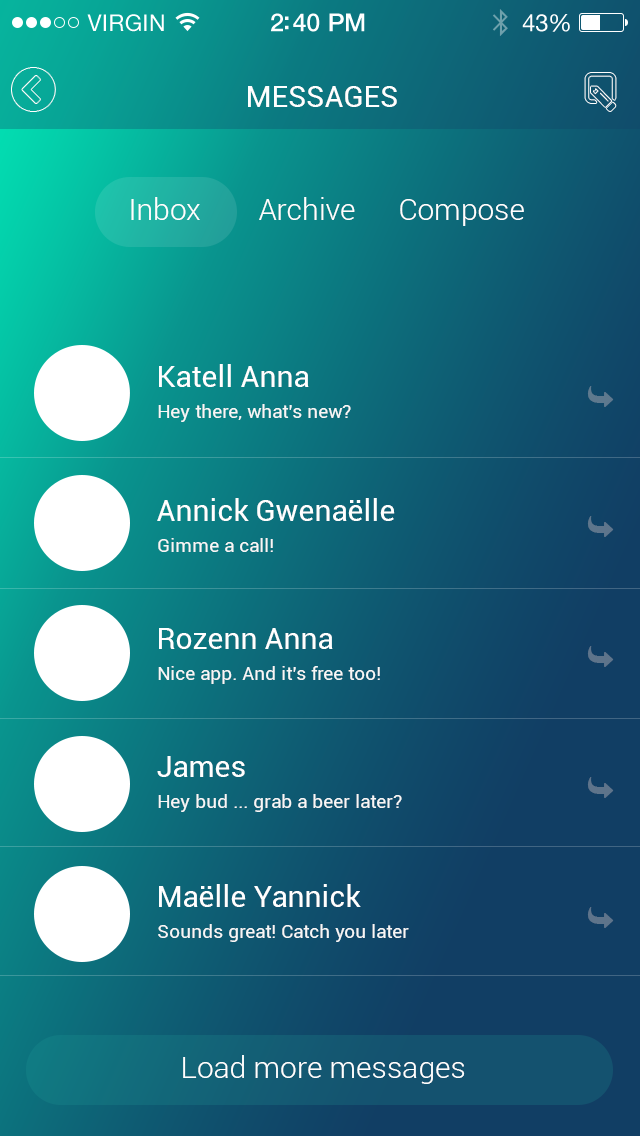
<style>
.page{position:relative;width:640px;height:1136px}
.page>*{position:absolute;margin:0}
.t1{font:30px "Roboto-Regular";color:#ffffff;text-transform:uppercase}
.t2{font:30px "Roboto-Light";color:#ffffff}
.t3{font:30px "Roboto-Regular";color:#ffffff}
.t4{font:19px "Roboto-Regular";color:#f7f7f7}
</style>
<div class="page">
<p class="t1" style="left:248px;top:86px;width:149px;height:21px">Messages</p>
<p class="t2" style="left:131px;top:197px;width:69px;height:23px">Inbox</p>
<p class="t2" style="left:259px;top:197px;width:96px;height:23px">Archive</p>
<p class="t2" style="left:400px;top:199px;width:124px;height:27px">Compose</p>
<p class="t3" style="left:159px;top:364px;width:150px;height:23px">Katell Anna</p>
<p class="t4" style="left:158px;top:404px;width:193px;height:18px">Hey there, what’s new?</p>
<p class="t3" style="left:157px;top:498px;width:238px;height:23px">Annick Gwenaëlle</p>
<p class="t4" style="left:158px;top:538px;width:115px;height:14px">Gimme a call!</p>
<p class="t3" style="left:159px;top:628px;width:174px;height:21px">Rozenn Anna</p>
<p class="t4" style="left:158px;top:666px;width:222px;height:18px">Nice app. And it’s free too!</p>
<p class="t3" style="left:157px;top:756px;width:88px;height:21px">James</p>
<p class="t4" style="left:158px;top:794px;width:244px;height:18px">Hey bud ... grab a beer later?</p>
<p class="t3" style="left:159px;top:884px;width:202px;height:23px">Maëlle Yannick</p>
<p class="t4" style="left:158px;top:924px;width:251px;height:18px">Sounds great! Catch you later</p>
<p class="t2" style="left:183px;top:1055px;width:282px;height:29px">Load more messages</p>
</div>
